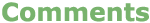
<style>
.page{position:relative;width:150px;height:23px;background:#ffffff}
.page>*{position:absolute;margin:0}
.t1{font:25px "Verdana-Bold";color:#78b36d}
</style>
<div class="page">
<p class="t1" style="left:2px;top:2px;width:147px;height:20px">Comments</p>
</div>
